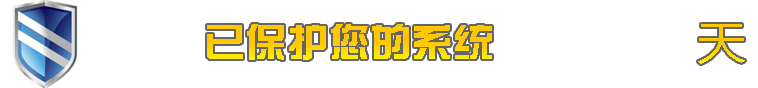
<style>
.page{position:relative;width:758px;height:88px;background:#ffffff}
.page>*{position:absolute;margin:0}
.t1{font:39.1px "FZZYJW--GB1-0";color:#fdc801;scale:1.06 1}
.t2{font:44.3px "MicrosoftYaHei";color:#fdc801;scale:1.08 1}
</style>
<div class="page">
<p class="t1" style="left:207px;top:24px;width:285px;height:36px">已保护您的系统</p>
<p class="t2" style="left:698px;top:24px;width:47px;height:40px">天</p>
</div>
